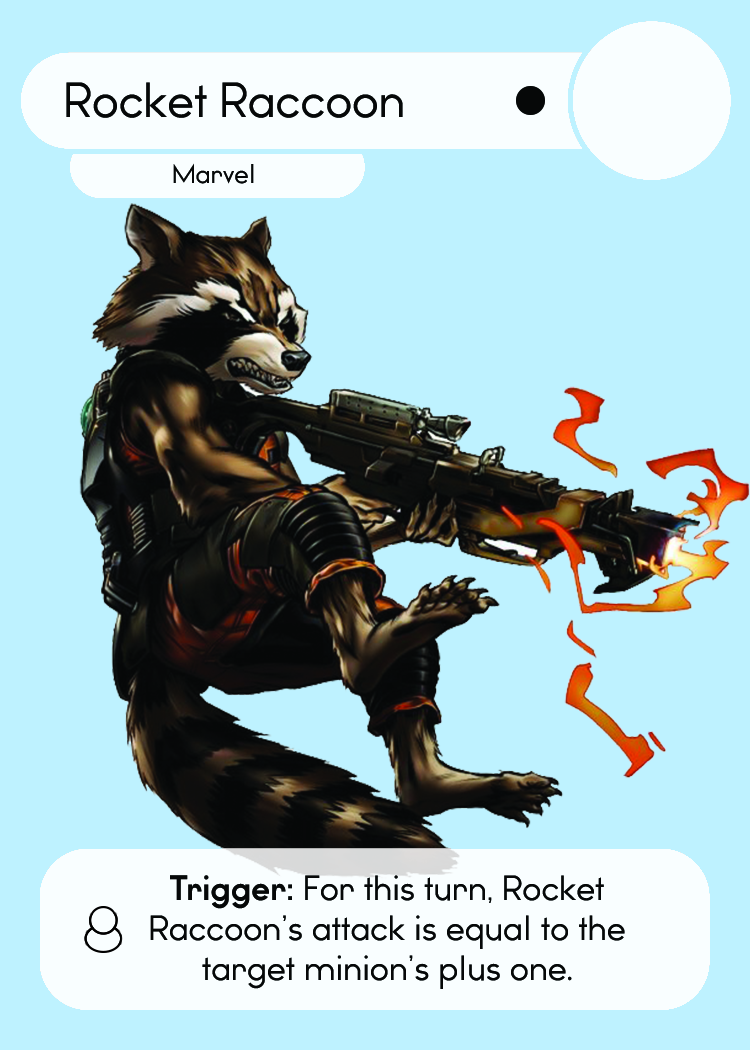
<style>
.page{position:relative;width:750px;height:1050px;background:#bef2ff}
.page>*{position:absolute;margin:0}
.t1{font:46.7px "WatchwordRegularDemo";color:#060808}
.t2{font:25.5px "WatchwordRegularDemo";color:#060808}
.t3{font:33.3px "WatchwordRegularDemo";color:#060808}
.t4{font:33.3px "WatchwordBoldDemo";color:#060808}
.t5{font:33.3px "Dosis-Medium";color:#060808}
</style>
<div class="page">
<p class="t1" style="left:66px;top:82px;width:337px;height:36px">Rocket Raccoon</p>
<p class="t2" style="left:173px;top:163px;width:81px;height:21px">Marvel</p>
<p class="t3" style="left:150px;top:875px;width:475px;height:114px;text-align:center"><span class="t4">Trigger: </span>For this turn, Rocket<br>Raccoon’s attack is equal to the<br>target minion’s plus one<span class="t5">.</span></p>
</div>
